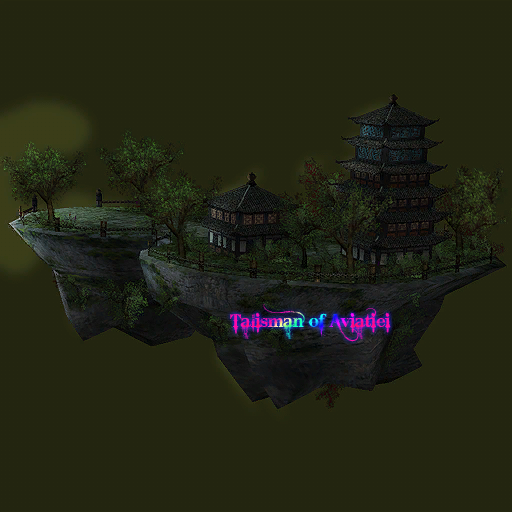
<style>
.page{position:relative;width:512px;height:512px;background:#232510}
.page>*{position:absolute;margin:0}
.t1{font:18px "BleedingCowboys"}
</style>
<div class="page">
<p class="t1" style="left:230px;top:304px;width:177px;height:51px">Talisman of Aviatiei</p>
</div>
